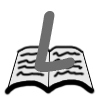
<style>
.page{position:relative;width:100px;height:100px;background:#ffffff}
.page>*{position:absolute;margin:0}
.t1{font:76px "ComicSansMS-BoldItalic";color:#6d6d6d}
</style>
<div class="page">
<p class="t1" style="left:34px;top:11px;width:41px;height:61px">L</p>
</div>
